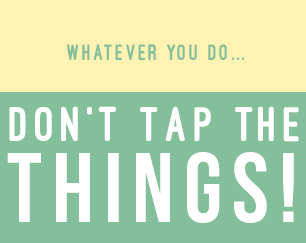
<style>
.page{position:relative;width:306px;height:243px;background:#84bf9b}
.page>*{position:absolute;margin:0}
.t1{font:23.1px "OstrichSans-Heavy";letter-spacing:0.1em;color:#84bf9b}
.t2{font:50.6px "OstrichSans-Heavy";letter-spacing:0.1em;color:#ffffff}
.t3{font:98.2px "BebasNeue";letter-spacing:0.1em;color:#ffffff}
</style>
<div class="page">
<p class="t1" style="left:67px;top:44px;width:178px;height:16px">whatever you do...</p>
<p class="t2" style="left:9px;top:106px;width:290px;height:36px">Don’t Tap The</p>
<p class="t3" style="left:7px;top:152px;width:287px;height:71px">Things!</p>
</div>
